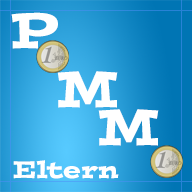
<style>
.page{position:relative;width:192px;height:192px}
.page>*{position:absolute;margin:0}
.t1{font:50px "PostinoStd";color:#ffffff}
.t2{font:24px "PostinoStd";color:#ffffff}
</style>
<div class="page">
<p class="t1" style="left:11px;top:12px;width:47px;height:37px">P</p>
<p class="t1" style="left:57px;top:71px;width:61px;height:37px">M</p>
<p class="t1" style="left:98px;top:109px;width:61px;height:37px">M</p>
<p class="t2" style="left:13px;top:160px;width:106px;height:19px">Eltern</p>
</div>
